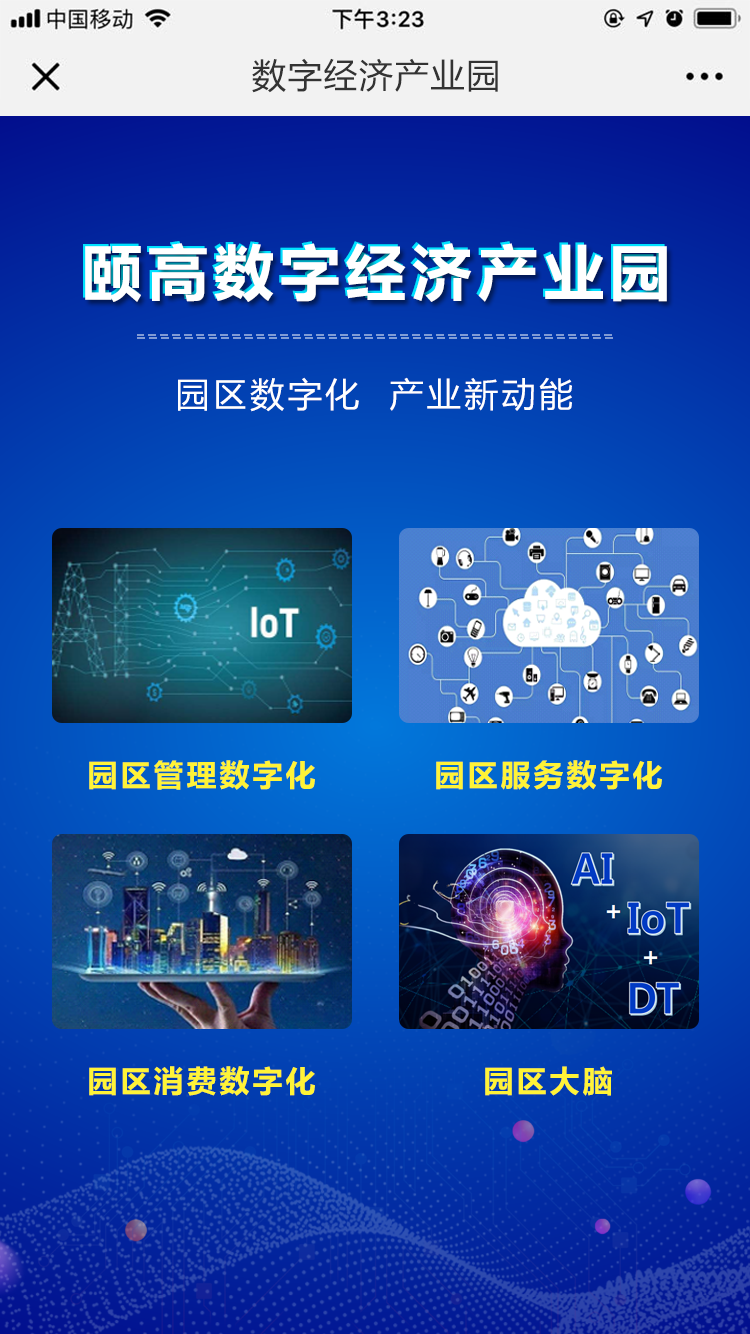
<style>
.page{position:relative;width:750px;height:1334px}
.page>*{position:absolute;margin:0}
.t1{font:34px "MicrosoftYaHei";letter-spacing:0.05em;color:#333333}
.t2{font:60px "MicrosoftYaHei-Bold";letter-spacing:0.1em;color:#ffffff}
.t3{font:34px "MicrosoftYaHei";letter-spacing:0.1em;color:#ffffff}
.t4{font:30px "MicrosoftYaHei-Bold";letter-spacing:0.1em;color:#fff337}
</style>
<div class="page">
<p class="t1" style="left:252px;top:58px;width:246px;height:35px">数字经济产业园</p>
<p class="t2" style="left:83px;top:241px;width:582px;height:59px">颐高数字经济产业园</p>
<p class="t2" style="left:85px;top:243px;width:582px;height:59px">颐高数字经济产业园</p>
<p class="t3" style="left:178px;top:377px;width:394px;height:35px">园区数字化  产业新动能</p>
<p class="t4" style="left:89px;top:760px;width:226px;height:30px">园区管理数字化</p>
<p class="t4" style="left:436px;top:760px;width:226px;height:30px">园区服务数字化</p>
<p class="t4" style="left:89px;top:1066px;width:226px;height:30px">园区消费数字化</p>
<p class="t4" style="left:485px;top:1066px;width:127px;height:30px">园区大脑</p>
</div>
